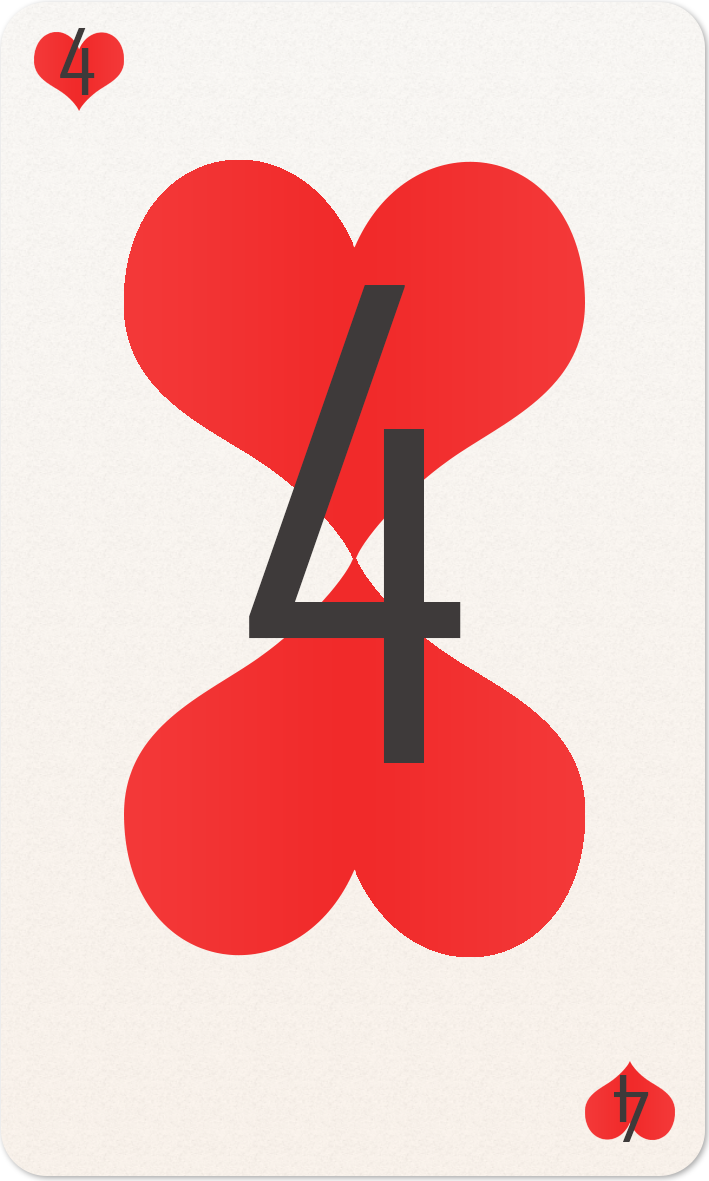
<style>
.page{position:relative;width:709px;height:1181px}
.page>*{position:absolute;margin:0}
.t1{font:87.7px "AgencyFB-Reg";color:#3e3a3a;scale:1.16 1}
.t2{font:625px "AgencyFB-Reg";color:#3e3a3a}
</style>
<div class="page">
<p class="t1" style="left:60px;top:28px;width:35px;height:67px">4</p>
<p class="t2" style="left:249px;top:285px;width:212px;height:478px">4</p>
<p class="t1" style="left:614px;top:1075px;width:35px;height:67px;rotate:180deg">4</p>
</div>
